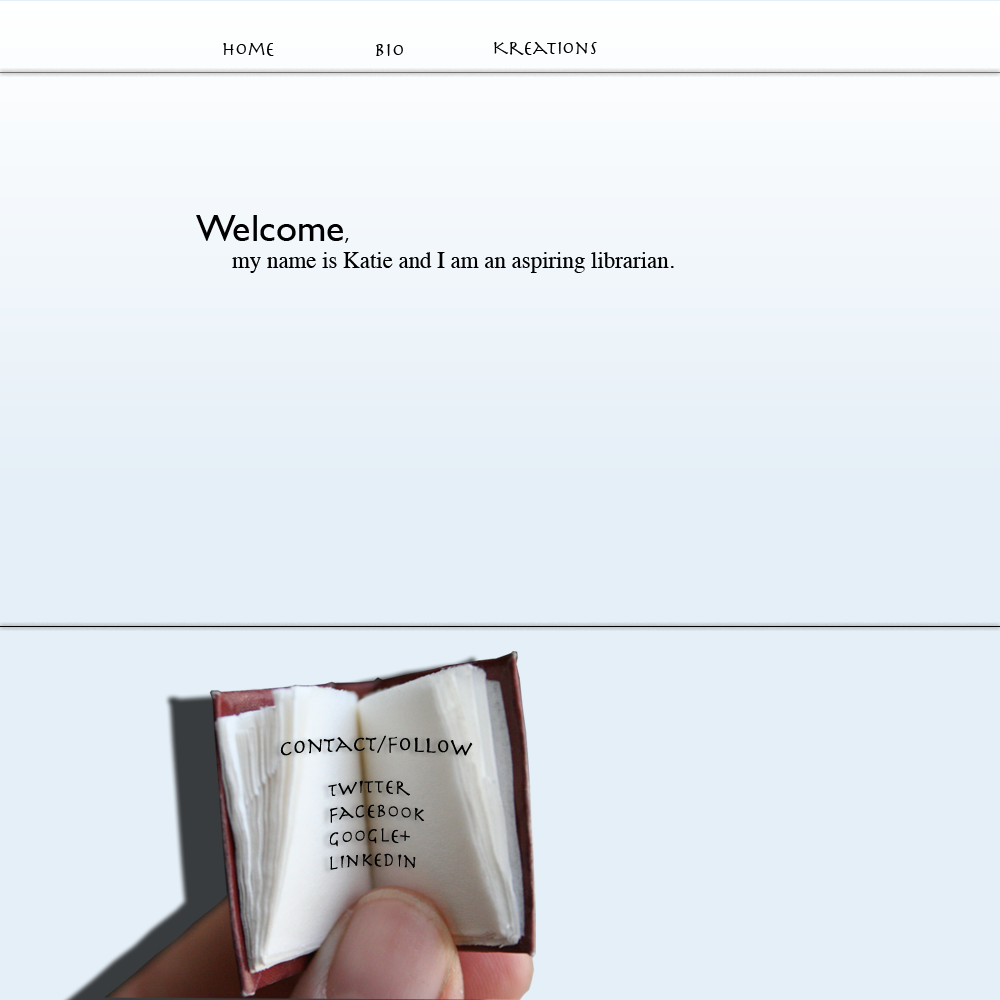
<style>
.page{position:relative;width:1000px;height:1000px;background:#e5eff7}
.page>*{position:absolute;margin:0}
.t1{font:20.3px "Herculanum";color:#000000}
.t2{font:22.9px "Times-Roman";color:#000000}
.t3{font:38.1px "GillSans";color:#000000}
.t4{font:22.9px "Herculanum";color:#000000}
</style>
<div class="page">
<p class="t1" style="left:223px;top:43px;width:51px;height:13px">Home</p>
<p class="t1" style="left:376px;top:44px;width:27px;height:12px">Bio</p>
<p class="t1" style="left:494px;top:42px;width:103px;height:13px">Kreations</p>
<p class="t2" style="left:196px;top:215px;width:478px;height:58px"><span class="t3">Welcome</span><span class="t1">,</span><br> my name is Katie and I am an aspiring librarian.</p>
<p class="t4" style="left:280px;top:735px;width:193px;height:21px">Contact/Follow</p>
<p class="t1" style="left:328px;top:780px;width:97px;height:90px">Twitter<br>Facebook<br>Google+<br>LinkedIn</p>
</div>
